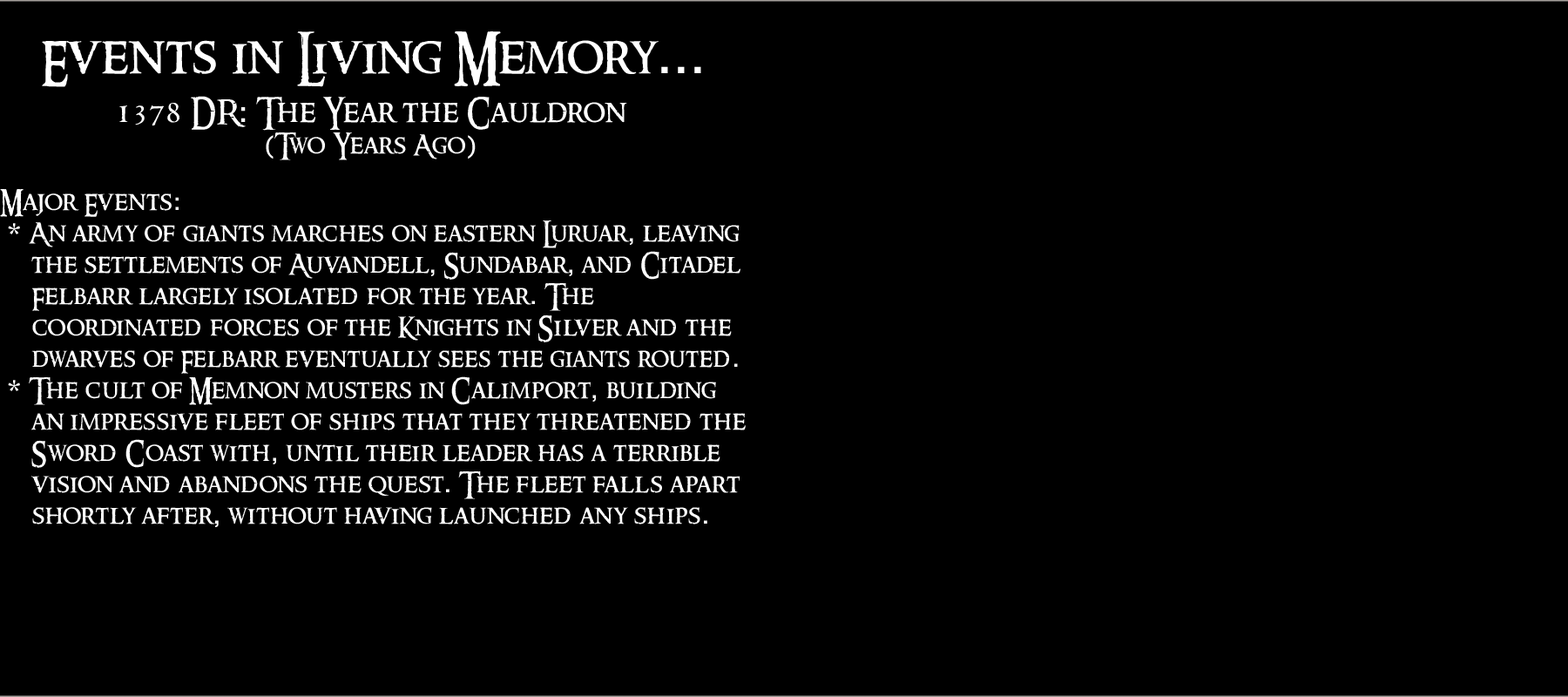
<style>
.page{position:relative;width:1568px;height:697px;background:#000000}
.page>*{position:absolute;margin:0}
.t1{font:26.1px "RingbearerMedium";letter-spacing:0.025em;color:#ffffff}
.t2{font:15.7px "RingbearerMedium";letter-spacing:0.025em;color:#ffffff}
.t3{font:52.3px "RingbearerMedium";letter-spacing:0.025em;color:#ffffff}
.t4{font:52.3px "Rockwell";letter-spacing:0.025em;color:#ffffff}
.t5{font:31.4px "RingbearerMedium";letter-spacing:0.025em;color:#ffffff}
.t6{font:31.4px "Rockwell";letter-spacing:0.025em;color:#ffffff}
.t7{font:26.1px "Rockwell";letter-spacing:0.025em;color:#ffffff}
</style>
<div class="page">
<p class="t1" style="left:0px;top:31px;width:746px;height:496px;text-align:center"><span class="t2"><br></span><span class="t3">Events in Living Memory</span><span class="t4">...<br><br></span><span class="t5">1378 DR</span><span class="t6">:</span><span class="t5"> The Year the Cauldron<br></span><span class="t7">(</span>Two Years Ago<span class="t7">)<br><br></span>Major Events<span class="t7">:<br> * </span>An army of giants marches on eastern Luruar<span class="t7">,</span> leaving <br> the settlements of Auvandell<span class="t7">,</span> Sundabar<span class="t7">,</span> and Citadel <br> Felbarr largely isolated for the year<span class="t7">.</span> The <br> coordinated forces of the Knights in Silver and the <br> dwarves of Felbarr eventually sees the giants routed<span class="t7">.<br> * </span>The cult of Memnon musters in Calimport<span class="t7">,</span> building            an impressive fleet of ships that they threatened the   Sword Coast with<span class="t7">,</span> until their leader has a terrible  <br> vision and abandons the quest<span class="t7">.</span> The fleet falls apart   shortly after<span class="t7">,</span> without having launched any ships<span class="t7">.</span></p>
</div>
